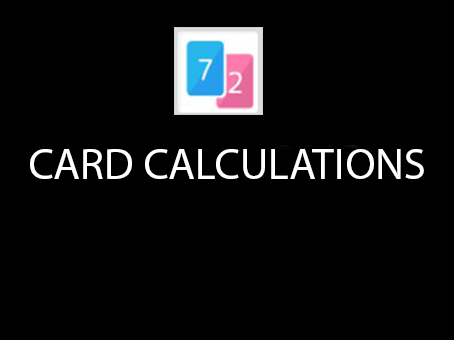
<style>
.page{position:relative;width:454px;height:340px;background:#000000}
.page>*{position:absolute;margin:0}
.t1{font:44px "MyriadPro-Regular";color:#ffffff}
</style>
<div class="page">
<p class="t1" style="left:30px;top:149px;width:394px;height:30px">CARD CALCULATIONS</p>
</div>
